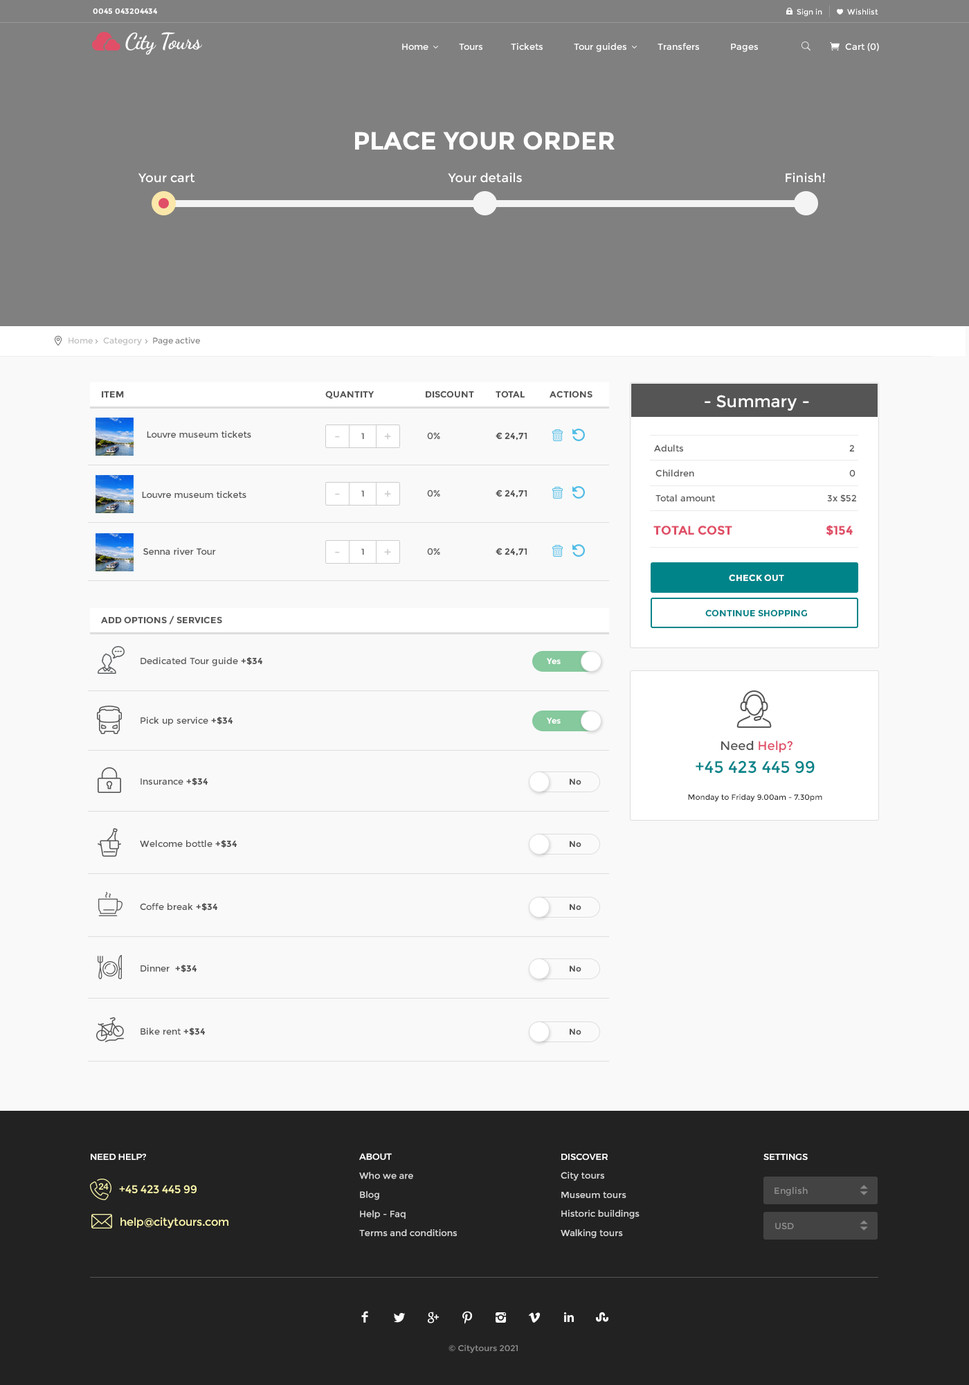
<style>
.page{position:relative;width:969px;height:1385px;background:#f9f9f9}
.page>*{position:absolute;margin:0}
.t1{font:7.6px "Montserrat-Bold";color:#ffffff}
.t2{font:7.6px "Montserrat-Regular";color:#ffffff}
.t3{font:22.2px "DancingScript-Bold";letter-spacing:-0.025em;color:#ffffff}
.t4{font:9px "Montserrat-Regular";color:#ffffff}
.t5{font:24.9px "Montserrat-Bold";color:#ffffff}
.t6{font:12.5px "Montserrat-Regular";color:#ffffff}
.t7{font:8.3px "Montserrat-Regular";color:#bebebe}
.t8{font:8.3px "Montserrat-Regular";color:#888888}
.t9{font:9px "Montserrat-Bold";color:#555555}
.t10{font:16.6px "Montserrat-Regular";color:#ffffff}
.t11{font:9px "Montserrat-Regular";color:#555555}
.t12{font:12.5px "Montserrat-Regular";color:#cecece}
.t13{font:8.3px "Montserrat-Regular";color:#555555}
.t14{font:9px/24.9px "Montserrat-Regular";color:#555555}
.t15{font:8.3px/24.9px "Montserrat-Regular";color:#555555}
.t16{font:12.5px/33.2px "Montserrat-Bold";color:#e04f67}
.t17{font:9px "Montserrat-Bold";color:#ffffff;text-transform:uppercase}
.t18{font:9px "Montserrat-Bold";color:#008489;text-transform:uppercase}
.t19{font:8.3px "Montserrat-Bold";color:#ffffff}
.t20{font:12.5px "Montserrat-Regular";color:#e04f67}
.t21{font:12.5px "Montserrat-Regular";color:#555555}
.t22{font:16.6px "Montserrat-Regular";color:#008489}
.t23{font:8.3px "Montserrat-Bold";color:#555555}
.t24{font:7.6px "Montserrat-Regular";color:#333333}
.t25{font:9px "Montserrat-Medium";color:#ffffff;text-transform:uppercase}
.t26{font:9px "Montserrat-Regular";color:#d8d8d8}
.t27{font:9px/8.3px "Montserrat-Medium";color:#ffffff;text-transform:uppercase}
.t28{font:11.1px "Montserrat-Regular";color:#fdf7ac}
.t29{font:9px "Montserrat-Regular";color:#8e8e8e}
.t30{font:8.2px "Montserrat-Regular";color:#8c8c8c;scale:1.04 1}
</style>
<div class="page">
<p class="t1" style="left:93px;top:8px;width:64px;height:6px">0045 043204434</p>
<p class="t2" style="left:797px;top:8px;width:82px;height:9px">Sign in            Wishlist</p>
<p class="t3" style="left:125px;top:32px;width:77px;height:23px">City Tours</p>
<p class="t4" style="left:402px;top:43px;width:356px;height:9px">Home           Tours          Tickets           Tour guides           Transfers           Pages</p>
<p class="t4" style="left:845px;top:43px;width:34px;height:8px">Cart (0)</p>
<p class="t5" style="left:355px;top:132px;width:260px;height:18px">PLACE YOUR ORDER</p>
<p class="t6" style="left:138px;top:173px;width:57px;height:10px">Your cart</p>
<p class="t6" style="left:448px;top:172px;width:74px;height:11px">Your details</p>
<p class="t6" style="left:786px;top:172px;width:39px;height:11px">Finish!</p>
<p class="t7" style="left:69px;top:337px;width:131px;height:8px">Home     Category     <span class="t8">Page active</span></p>
<p class="t9" style="left:102px;top:390px;width:491px;height:9px">ITEM                                                                                                QUANTITY              DISCOUNT           TOTAL ACTIONS</p>
<p class="t10" style="left:705px;top:395px;width:104px;height:16px">- Summary -</p>
<p class="t11" style="left:147px;top:431px;width:104px;height:7px">Louvre museum tickets</p>
<p class="t12" style="left:335px;top:435px;width:5px;height:3px">-</p>
<p class="t13" style="left:361px;top:433px;width:3px;height:6px">1</p>
<p class="t12" style="left:384px;top:433px;width:7px;height:7px">+</p>
<p class="t11" style="left:427px;top:432px;width:13px;height:7px">0%</p>
<p class="t9" style="left:496px;top:432px;width:31px;height:8px">€ 24,71</p>
<p class="t14" style="left:654px;top:444px;width:202px;height:92px"><span class="t15">  </span>Adults               2<br>  Children               0<br>  Total amount                                      3x $52<br><span class="t16"> TOTAL COST                       $154</span></p>
<p class="t11" style="left:142px;top:491px;width:104px;height:7px">Louvre museum tickets</p>
<p class="t12" style="left:335px;top:493px;width:5px;height:2px">-</p>
<p class="t13" style="left:361px;top:490px;width:3px;height:6px">1</p>
<p class="t12" style="left:384px;top:490px;width:7px;height:7px">+</p>
<p class="t11" style="left:427px;top:489px;width:13px;height:7px">0%</p>
<p class="t9" style="left:496px;top:489px;width:31px;height:9px">€ 24,71</p>
<p class="t11" style="left:143px;top:548px;width:73px;height:7px">Senna river Tour</p>
<p class="t12" style="left:335px;top:551px;width:5px;height:2px">-</p>
<p class="t13" style="left:361px;top:548px;width:3px;height:7px">1</p>
<p class="t12" style="left:384px;top:548px;width:7px;height:7px">+</p>
<p class="t11" style="left:427px;top:548px;width:13px;height:7px">0%</p>
<p class="t9" style="left:496px;top:548px;width:31px;height:8px">€ 24,71</p>
<p class="t17" style="left:729px;top:574px;width:55px;height:7px">check out</p>
<p class="t9" style="left:101px;top:615px;width:121px;height:9px">ADD OPTIONS / SERVICES</p>
<p class="t18" style="left:705px;top:609px;width:102px;height:7px">Continue shopping</p>
<p class="t11" style="left:141px;top:657px;width:121px;height:9px">Dedicated Tour guide <span class="t9">+$34</span></p>
<p class="t19" style="left:546px;top:658px;width:15px;height:6px">Yes</p>
<p class="t11" style="left:141px;top:717px;width:92px;height:9px">Pick up service <span class="t9">+$34</span></p>
<p class="t19" style="left:546px;top:717px;width:15px;height:6px">Yes</p>
<p class="t20" style="left:721px;top:740px;width:72px;height:13px"><span class="t21">Need</span> Help?</p>
<p class="t22" style="left:696px;top:760px;width:119px;height:13px">+45 423 445 99</p>
<p class="t11" style="left:141px;top:777px;width:67px;height:8px">Insurance <span class="t9">+$34</span></p>
<p class="t23" style="left:570px;top:778px;width:12px;height:6px">No</p>
<p class="t24" style="left:688px;top:793px;width:134px;height:9px">Monday to Friday 9.00am - 7.30pm</p>
<p class="t11" style="left:140px;top:840px;width:97px;height:7px">Welcome bottle <span class="t9">+$34</span></p>
<p class="t23" style="left:570px;top:840px;width:12px;height:7px">No</p>
<p class="t11" style="left:140px;top:903px;width:77px;height:7px">Coffe break <span class="t9">+$34</span></p>
<p class="t23" style="left:570px;top:903px;width:12px;height:7px">No</p>
<p class="t11" style="left:141px;top:964px;width:56px;height:8px">Dinner  <span class="t9">+$34</span></p>
<p class="t23" style="left:570px;top:965px;width:12px;height:6px">No</p>
<p class="t11" style="left:141px;top:1027px;width:64px;height:8px">Bike rent <span class="t9">+$34</span></p>
<p class="t23" style="left:570px;top:1028px;width:12px;height:6px">No</p>
<p class="t25" style="left:91px;top:1153px;width:55px;height:7px">Need help?</p>
<p class="t26" style="left:359px;top:1153px;width:98px;height:83px"><span class="t27">About<br></span>Who we are<br>Blog<br>Help - Faq<br>Terms and conditions</p>
<p class="t26" style="left:561px;top:1153px;width:79px;height:85px"><span class="t27">Discover<br></span>City tours<br>Museum tours<br>Historic buildings<br>Walking tours</p>
<p class="t25" style="left:764px;top:1153px;width:44px;height:7px">Settings</p>
<p class="t28" style="left:119px;top:1185px;width:78px;height:9px">+45 423 445 99</p>
<p class="t29" style="left:775px;top:1187px;width:33px;height:9px">English</p>
<p class="t28" style="left:120px;top:1216px;width:108px;height:12px">help@citytours.com</p>
<p class="t29" style="left:775px;top:1222px;width:19px;height:7px">USD</p>
<p class="t30" style="left:449px;top:1344px;width:69px;height:9px">© Citytours 2021</p>
</div>
